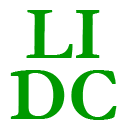
<style>
.page{position:relative;width:128px;height:128px;background:#ffffff}
.page>*{position:absolute;margin:0}
.t1{font:75px "Garamond-Bold";color:#009900}
</style>
<div class="page">
<p class="t1" style="left:26px;top:10px;width:74px;height:48px">LI</p>
<p class="t1" style="left:10px;top:70px;width:107px;height:50px">DC</p>
</div>
